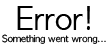
<style>
.page{position:relative;width:108px;height:47px;background:#ffffff}
.page>*{position:absolute;margin:0}
.t1{font:30px "AppleGothic";color:#000000}
.t2{font:9px "AppleGothic";color:#000000}
</style>
<div class="page">
<p class="t1" style="left:17px;top:6px;width:73px;height:24px">Error!</p>
<p class="t2" style="left:2px;top:34px;width:104px;height:10px">Something went wrong...</p>
</div>
